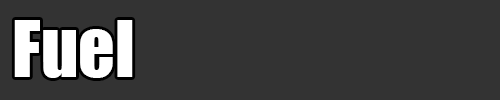
<style>
.page{position:relative;width:500px;height:100px;background:#333333}
.page>*{position:absolute;margin:0}
.t1{font:72px "Impact";color:#ffffff}
</style>
<div class="page">
<p class="t1" style="left:14px;top:20px;width:119px;height:58px">Fuel</p>
</div>
